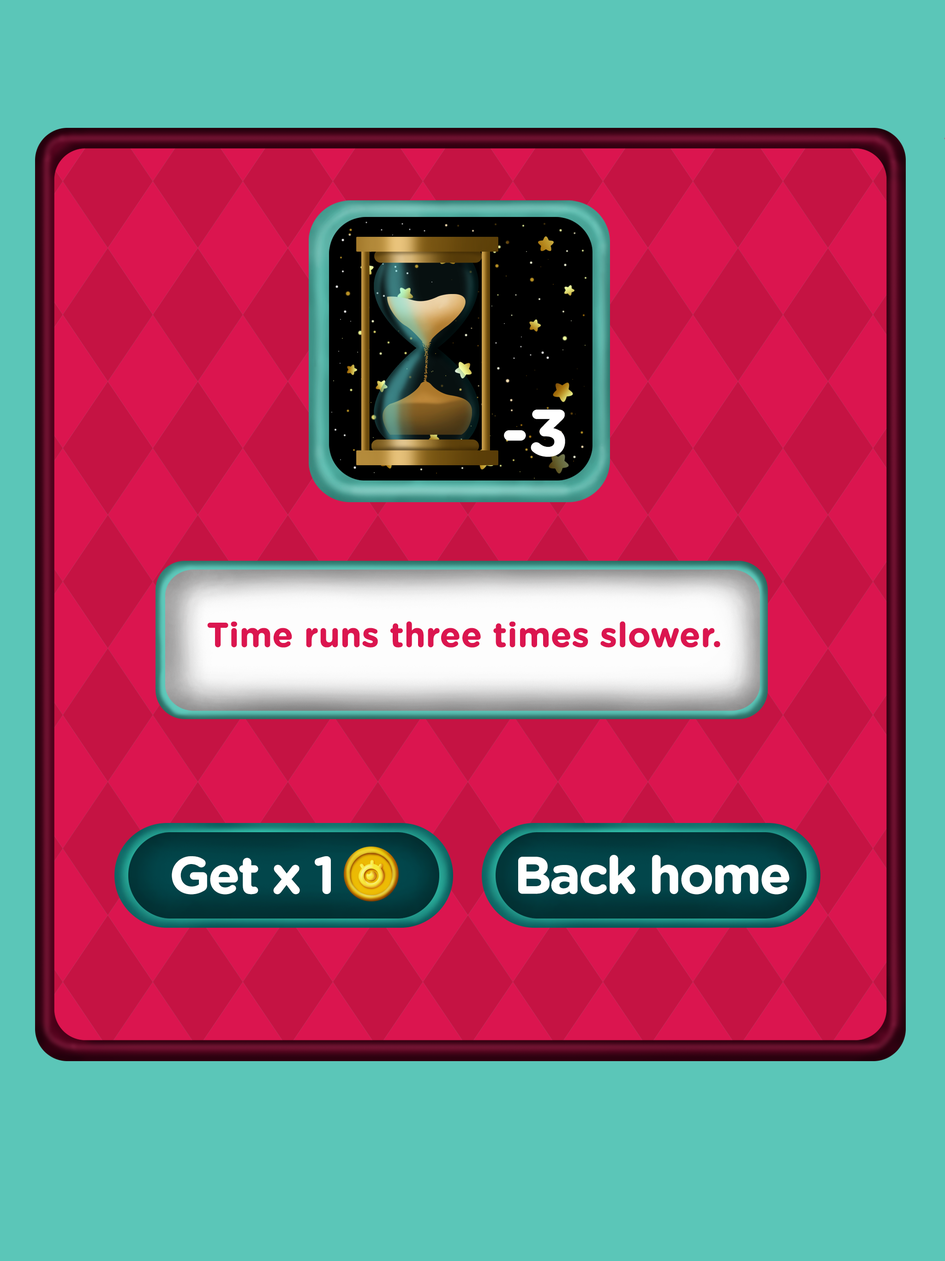
<style>
.page{position:relative;width:945px;height:1261px;background:#5bc6b8}
.page>*{position:absolute;margin:0}
.t1{font:65px "GothamRounded-Bold";letter-spacing:-0.023em;color:#ffffff;font-weight:bold}
.t2{font:34.5px "GothamRounded-Bold";letter-spacing:-0.023em;color:#db154f;font-weight:bold}
.t3{font:52px "GothamRounded-Bold";letter-spacing:-0.063em;color:#ffffff;font-weight:bold}
</style>
<div class="page">
<p class="t1" style="left:504px;top:409px;width:62px;height:48px">-3</p>
<p class="t2" style="left:207px;top:621px;width:514px;height:27px">Time runs three times slower.</p>
<p class="t3" style="left:172px;top:856px;width:159px;height:39px">Get x 1</p>
<p class="t3" style="left:518px;top:855px;width:272px;height:40px">Back home</p>
</div>
